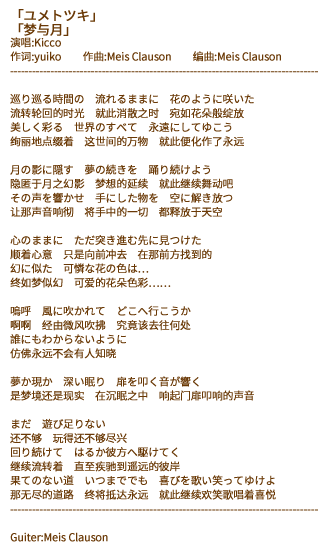
<style>
.page{position:relative;width:328px;height:552px;background:#ffffff}
.page>*{position:absolute;margin:0}
.t1{font:10.7px/14.1px "SourceHanSansSC-Regular";letter-spacing:-0.03em;color:#6a3906;font-weight:bold}
.t2{font:13.3px/14.1px "SourceHanSansSC-Regular";letter-spacing:-0.03em;color:#6a3906;font-weight:bold}
</style>
<div class="page">
<p class="t1" style="left:10px;top:9px;width:308px;height:533px"><span class="t2">「ユメトツキ」<br>「梦与月」<br></span>演唱:Kicco<br>作词:yuiko　　作曲:Meis Clauson　　编曲:Meis Clauson<br>------------------------------------------------------------------------------------<br><br>巡り巡る時間の　流れるままに　花のように咲いた<br>流转轮回的时光　就此消散之时　宛如花朵般绽放<br>美しく彩る　世界のすべて　永遠にしてゆこう<br>绚丽地点缀着　这世间的万物　就此便化作了永远<br><br>月の影に隠す　夢の続きを　踊り続けよう<br>隐匿于月之幻影　梦想的延续　就此继续舞动吧<br>その声を響かせ　手にした物を　空に解き放つ<br>让那声音响彻　将手中的一切　都释放于天空<br><br>心のままに　ただ突き進む先に見つけた<br>顺着心意　只是向前冲去　在那前方找到的<br>幻に似た　可憐な花の色は…<br>终如梦似幻　可爱的花朵色彩……<br><br>嗚呼　風に吹かれて　どこへ行こうか<br>啊啊　经由微风吹拂　究竟该去往何处<br>誰にもわからないように<br>仿佛永远不会有人知晓<br><br>夢か現か　深い眠り　扉を叩く音が響く<br>是梦境还是现实　在沉眠之中　响起门扉叩响的声音<br><br>まだ　遊び足りない<br>还不够　玩得还不够尽兴<br>回り続けて　はるか彼方へ駆けてく<br>继续流转着　直至疾驰到遥远的彼岸<br>果てのない道　いつまででも　喜びを歌い笑ってゆけよ<br>那无尽的道路　终将抵达永远　就此继续欢笑歌唱着喜悦<br>------------------------------------------------------------------------------------<br><br>Guiter:Meis Clauson</p>
</div>
